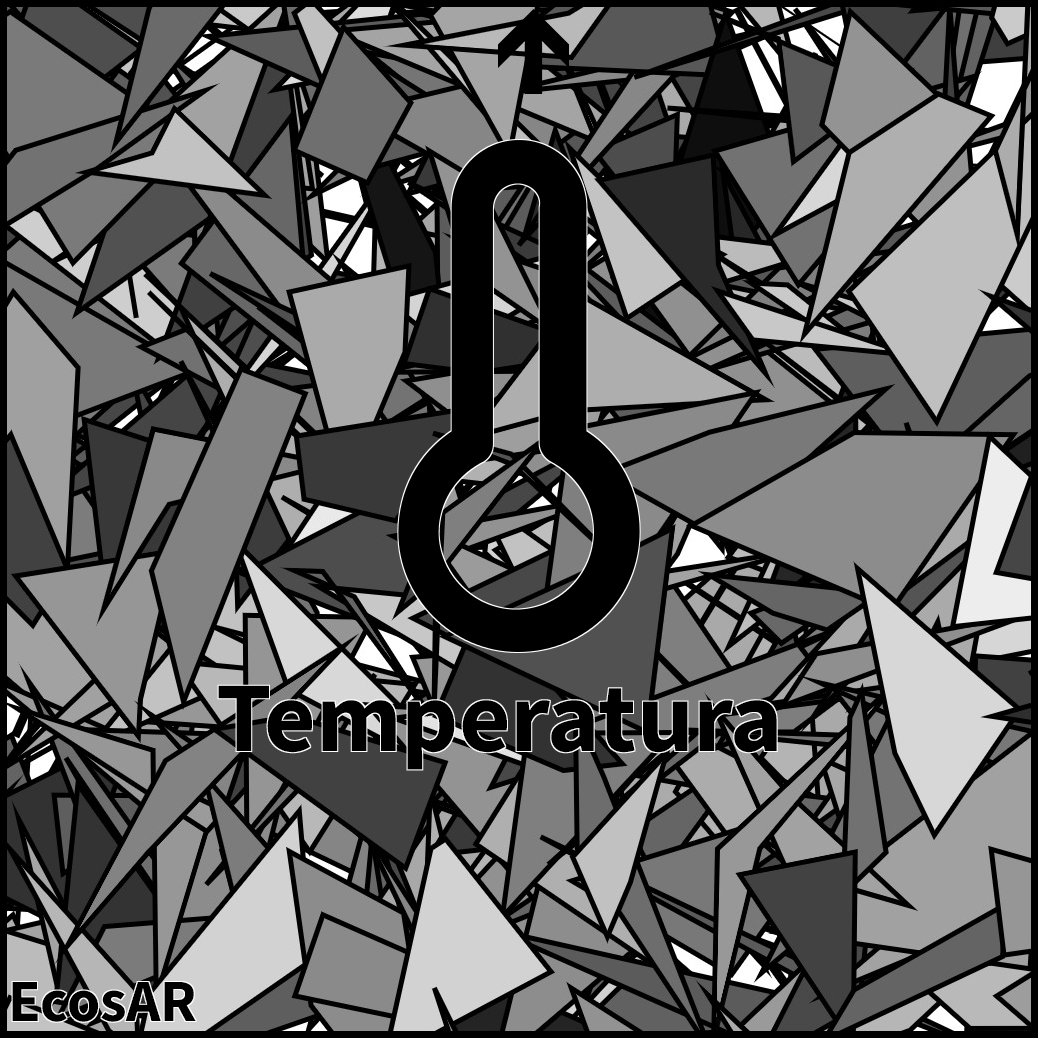
<style>
.page{position:relative;width:1038px;height:1038px}
.page>*{position:absolute;margin:0}
.t1{font:100px "SourceSansRoman-Bold";color:#000000}
.t2{font:60px "SourceSansRoman-Bold";color:#000000}
</style>
<div class="page">
<p class="t1" style="left:218px;top:685px;width:559px;height:85px">Temperatura</p>
<p class="t2" style="left:12px;top:982px;width:184px;height:40px">EcosAR</p>
</div>
